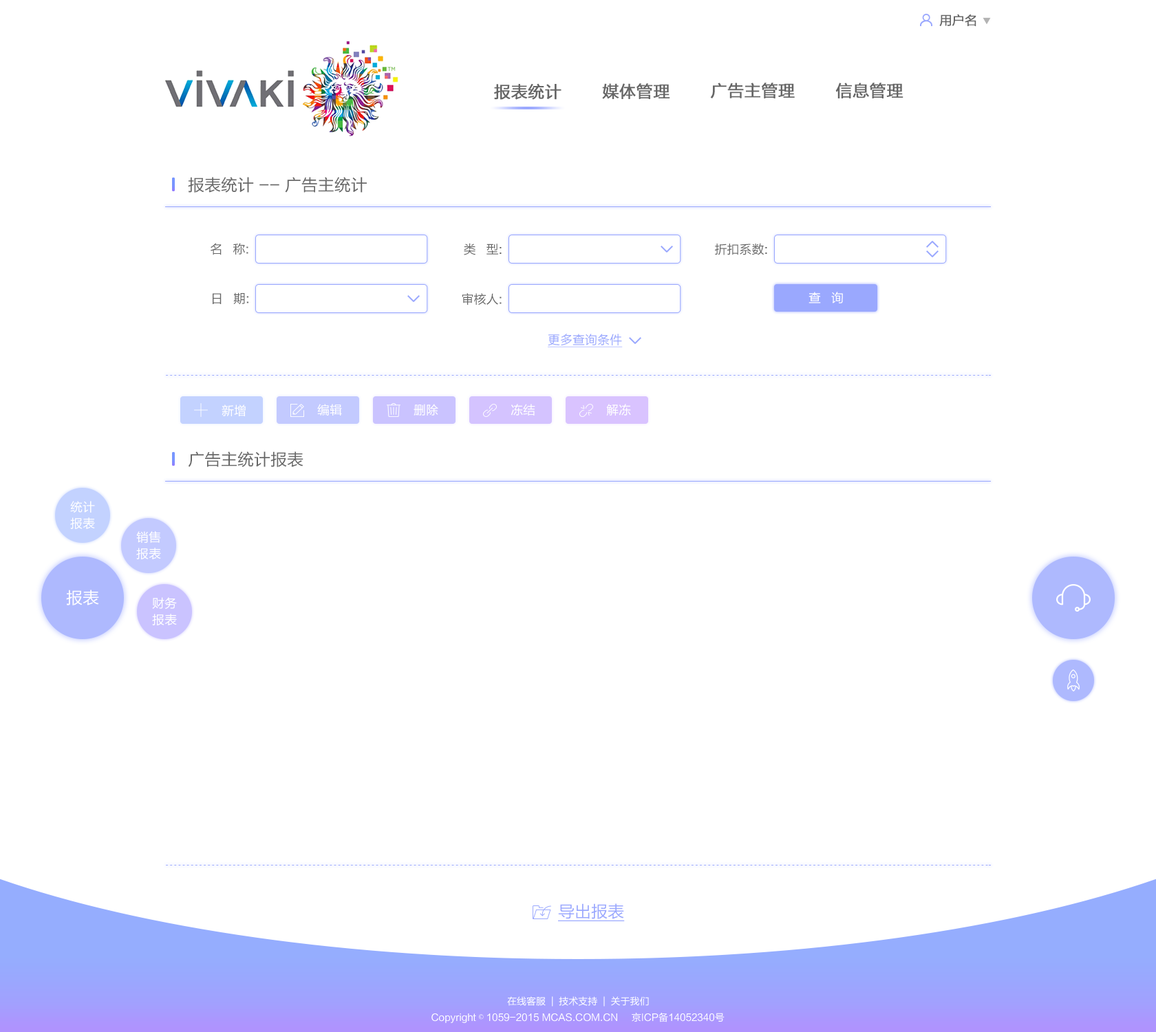
<style>
.page{position:relative;width:1156px;height:1032px;background:#ffffff}
.page>*{position:absolute;margin:0}
.t1{font:12.4px "FZLTHJW--GB1-0";color:#666666;font-weight:bold}
.t2{font:16.5px "FZLTHJW--GB1-0";color:#666666;font-weight:bold}
.t3{font:16.5px "FZLTHJW--GB1-0";color:#666666}
.t4{font:12.4px "FZLTHJW--GB1-0";color:#666666}
.t5{font:12.4px "FZLTHJW--GB1-0";color:#ffffff}
.t6{font:12.4px "FZLTHJW--GB1-0";color:#9aa8fe;text-decoration:underline}
.t7{font:12.4px/16.5px "FZLTHJW--GB1-0";color:#ffffff}
.t8{font:16.5px "FZLTHJW--GB1-0";color:#ffffff}
.t9{font:16.5px "FZLTHJW--GB1-0";color:#9aa8fe;text-decoration:underline}
.t10{font:9.6px "FZLTHJW--GB1-0";color:#ffffff}
.t11{font:9.6px "SimSun";color:#ffffff}
</style>
<div class="page">
<p class="t1" style="left:939px;top:14px;width:37px;height:12px">用户名</p>
<p class="t2" style="left:494px;top:83px;width:67px;height:17px">报表统计</p>
<p class="t2" style="left:602px;top:83px;width:68px;height:16px">媒体管理</p>
<p class="t2" style="left:710px;top:83px;width:85px;height:15px">广告主管理</p>
<p class="t2" style="left:835px;top:83px;width:68px;height:15px">信息管理</p>
<p class="t3" style="left:188px;top:177px;width:179px;height:16px">报表统计 -- 广告主统计</p>
<p class="t4" style="left:210px;top:243px;width:38px;height:12px">名   称:</p>
<p class="t4" style="left:464px;top:243px;width:37px;height:12px">类   型:</p>
<p class="t4" style="left:715px;top:243px;width:52px;height:12px">折扣系数:</p>
<p class="t4" style="left:213px;top:292px;width:35px;height:13px">日   期:</p>
<p class="t4" style="left:462px;top:293px;width:39px;height:12px">审核人:</p>
<p class="t5" style="left:808px;top:292px;width:35px;height:11px">查   询</p>
<p class="t6" style="left:548px;top:334px;width:75px;height:13px">更多查询条件</p>
<p class="t5" style="left:221px;top:404px;width:25px;height:12px">新增</p>
<p class="t5" style="left:317px;top:404px;width:25px;height:11px">编辑</p>
<p class="t5" style="left:413px;top:404px;width:25px;height:11px">删除</p>
<p class="t5" style="left:510px;top:404px;width:25px;height:11px">冻结</p>
<p class="t5" style="left:606px;top:404px;width:25px;height:11px">解冻</p>
<p class="t3" style="left:188px;top:451px;width:115px;height:16px">广告主统计报表</p>
<p class="t7" style="left:70px;top:501px;width:25px;height:28px">统计<br>报表</p>
<p class="t7" style="left:136px;top:531px;width:25px;height:28px">销售<br>报表</p>
<p class="t8" style="left:66px;top:590px;width:33px;height:15px">报表</p>
<p class="t7" style="left:152px;top:597px;width:25px;height:28px">财务<br>报表</p>
<p class="t9" style="left:558px;top:903px;width:67px;height:18px">导出报表</p>
<p class="t10" style="left:507px;top:996px;width:142px;height:10px">在线客服  |  技术支持  |  关于我们</p>
<p class="t10" style="left:431px;top:1013px;width:293px;height:10px">Copyright <span class="t11">©</span> 1059-2015 MCAS.COM.CN     京ICP备14052340号</p>
</div>
